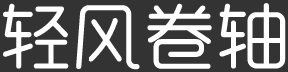
<style>
.page{position:relative;width:288px;height:72px;background:#333333}
.page>*{position:absolute;margin:0}
.t1{font:72px "MFYueYuan_Noncommercial-Regular";color:#ffffff}
</style>
<div class="page">
<p class="t1" style="left:3px;top:3px;width:283px;height:67px">轻风卷轴</p>
</div>
